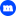
<style>
.page{position:relative;width:16px;height:16px;background:#0048ff}
.page>*{position:absolute;margin:0}
.t1{font:11px "ChunkFive-Regular";letter-spacing:-0.02em;color:#ffffff}
</style>
<div class="page">
<p class="t1" style="left:3px;top:5px;width:10px;height:7px">m</p>
</div>
